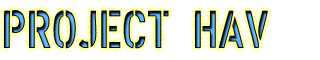
<style>
.page{position:relative;width:320px;height:60px;background:#ffffff}
.page>*{position:absolute;margin:0}
.t1{font:52.7px "XXIISTRAIGHT-ARMY"}
</style>
<div class="page">
<p class="t1" style="left:4px;top:10px;width:264px;height:39px">PROJECT HAV</p>
</div>
